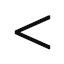
<style>
.page{position:relative;width:64px;height:64px;background:#ffffff}
.page>*{position:absolute;margin:0}
.t1{font:59.9px "YuGothic-Regular";letter-spacing:-0.14em;color:#101010;font-weight:bold}
</style>
<div class="page">
<p class="t1" style="left:14px;top:15px;width:37px;height:35px">&lt;</p>
</div>
